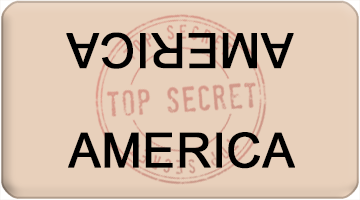
<style>
.page{position:relative;width:360px;height:200px;background:#e8d0bb}
.page>*{position:absolute;margin:0}
.t1{font:48px "ArialMT";color:#000000;font-weight:bold}
</style>
<div class="page">
<p class="t1" style="left:66px;top:32px;width:228px;height:37px;rotate:180deg">AMERICA</p>
<p class="t1" style="left:68px;top:132px;width:227px;height:37px">AMERICA</p>
</div>
